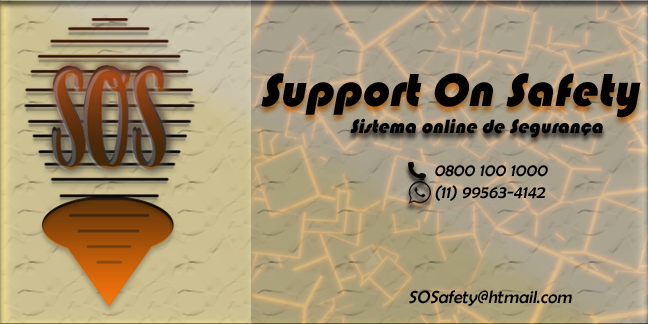
<style>
.page{position:relative;width:648px;height:324px}
.page>*{position:absolute;margin:0}
.t1{font:48px "Bauhaus93";color:#020100;font-style:italic}
.t2{font:20px "Bauhaus93";color:#000000;font-style:italic}
.t3{font:18px "BerlinSansFB-Reg";color:#000000;font-style:italic}
</style>
<div class="page">
<p class="t1" style="left:261px;top:73px;width:380px;height:45px">Support On Safety</p>
<p class="t2" style="left:350px;top:118px;width:253px;height:20px">Sistema online de Segurança</p>
<p class="t3" style="left:435px;top:165px;width:113px;height:12px">0800 100 1000</p>
<p class="t3" style="left:435px;top:185px;width:111px;height:16px">(11) 99563-4142</p>
<p class="t3" style="left:409px;top:290px;width:163px;height:16px">SOSafety@htmail.com</p>
</div>
